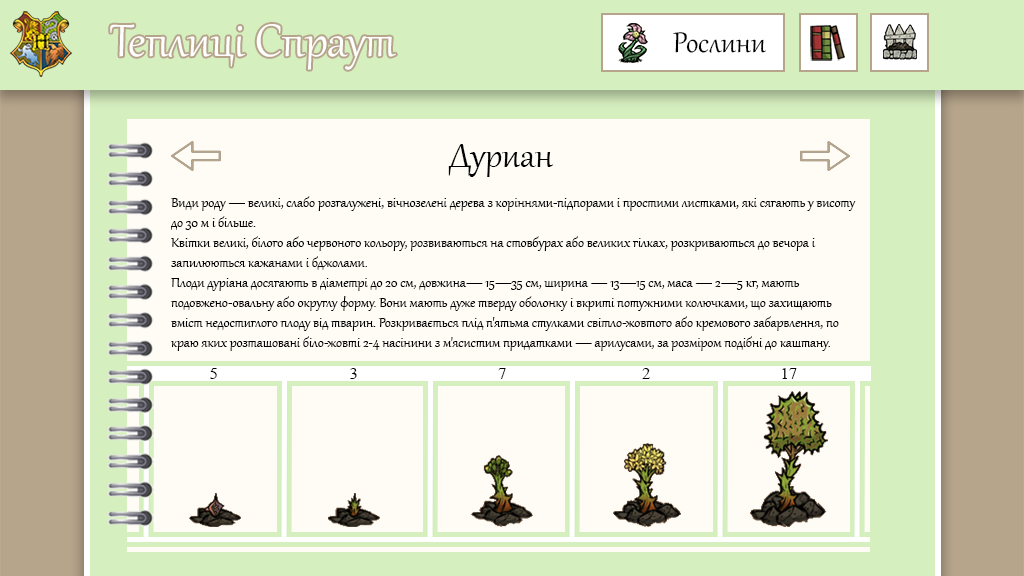
<style>
.page{position:relative;width:1024px;height:576px;background:#fffbf5}
.page>*{position:absolute;margin:0}
.t1{font:55.8px "Gabriola";color:#ffffff}
.t2{font:34.9px "Gabriola";color:#000000}
.t3{font:41.7px "Gabriola";color:#000000}
.t4{font:16.7px "Gabriola";color:#000000}
.t5{font:16.7px "TimesNewRomanPSMT";color:#000000}
</style>
<div class="page">
<p class="t1" style="left:110px;top:24px;width:286px;height:46px">Теплиці Спраут</p>
<p class="t2" style="left:673px;top:32px;width:93px;height:21px">Рослини</p>
<p class="t3" style="left:448px;top:144px;width:106px;height:33px">Дуриан</p>
<p class="t4" style="left:170px;top:196px;width:686px;height:155px">Види роду — великі, слабо розгалужені, вічнозелені дерева з коріннями-підпорами і простими листками, які сягають у висоту до 30 м і більше.<br>Квітки великі, білого або червоного кольору, розвиваються на стовбурах або великих гілках, розкриваються до вечора і запилюються кажанами і бджолами.<br>Плоди дуріана досягають в діаметрі до 20 см, довжина— 15—35 см, ширина — 13—15 см, маса — 2—5 кг, мають подовжено-овальну або округлу форму. Вони мають дуже тверду оболонку і вкриті потужними колючками, що захищають вміст недостиглого плоду від тварин. Розкривається плід п'ятьма стулками світло-жовтого або кремового забарвлення, по краю яких розташовані біло-жовті 2-4 насінини з м'ясистим придатками — арилусами, за розміром подібні до каштану.</p>
<p class="t5" style="left:210px;top:368px;width:7px;height:11px">5</p>
<p class="t5" style="left:350px;top:368px;width:7px;height:11px">3</p>
<p class="t5" style="left:498px;top:368px;width:8px;height:11px">7</p>
<p class="t5" style="left:642px;top:368px;width:8px;height:11px">2</p>
<p class="t5" style="left:782px;top:368px;width:15px;height:11px">17</p>
</div>
